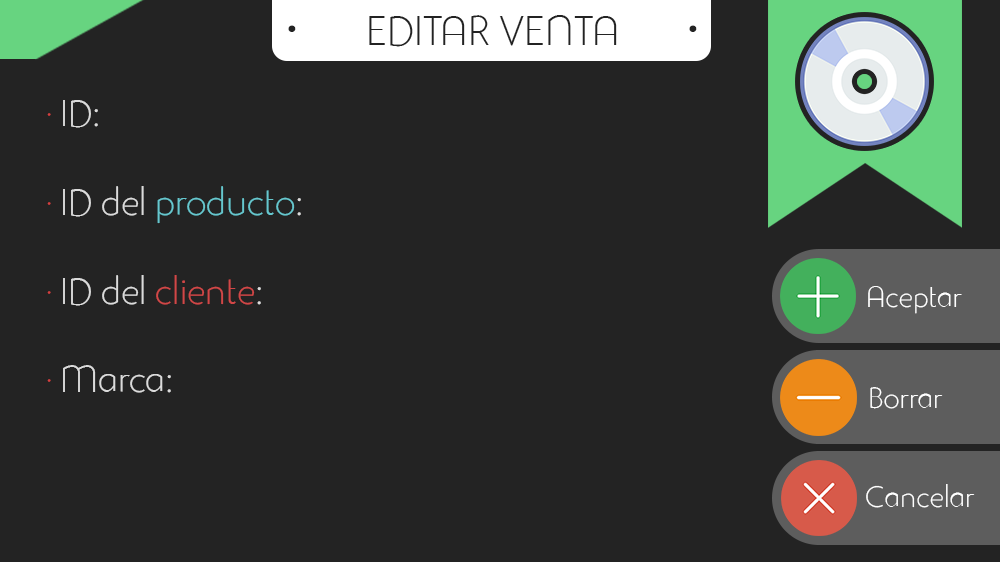
<style>
.page{position:relative;width:1000px;height:562px;background:#232323}
.page>*{position:absolute;margin:0}
.t1{font:41px "StudioGothicAlternateTrial-Extr";color:#232323}
.t2{font:97px "StudioGothicAlternateTrial-Extr";color:#232323}
.t3{font:37px "StudioGothicAlternateTrial-Extr";color:#66c7ce}
.t4{font:37px "StudioGothicAlternateTrial-Extr";color:#d63f3f}
.t5{font:37px "StudioGothicAlternateTrial-Extr";color:#dbdbdb}
.t6{font:37px "StudioGothicAlternateTrial-Extr";color:#d14747}
.t7{font:29px "StudioGothicAlternateTrial-Extr";color:#ffffff}
</style>
<div class="page">
<p class="t1" style="left:369px;top:15px;width:248px;height:32px">EDITAR VENTA</p>
<p class="t2" style="left:288px;top:25px;width:409px;height:7px">·                 ·</p>
<p class="t3" style="left:47px;top:100px;width:254px;height:293px"><span class="t4">· </span><span class="t5">ID:<br></span><span class="t4"><br>· </span><span class="t5">ID del </span>producto<span class="t5">:<br><br></span><span class="t4">· </span><span class="t5">ID del </span><span class="t6">cliente</span><span class="t5">:<br><br></span><span class="t4">· </span><span class="t5">Marca:</span></p>
<p class="t7" style="left:868px;top:286px;width:94px;height:28px">Aceptar</p>
<p class="t7" style="left:870px;top:387px;width:73px;height:22px">Borrar</p>
<p class="t7" style="left:866px;top:484px;width:109px;height:24px">Cancelar</p>
</div>
